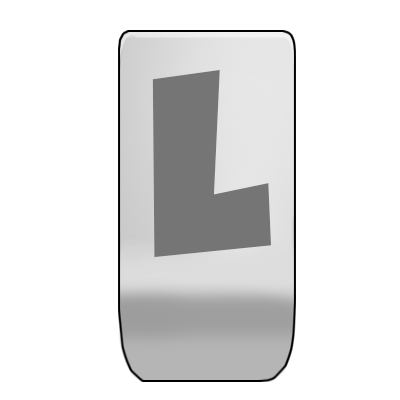
<style>
.page{position:relative;width:400px;height:400px;background:#ffffff}
.page>*{position:absolute;margin:0}
.t1{font:221.3px "GROBOLD";color:#757575}
</style>
<div class="page">
<p class="t1" style="left:152px;top:70px;width:119px;height:187px">L</p>
</div>
